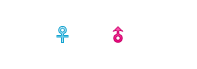
<style>
.page{position:relative;width:197px;height:69px;background:#ffffff}
.page>*{position:absolute;margin:0}
.t1{font:18px "DFPYaSongW9";letter-spacing:0.04em}
.t2{font:18px "DFPYaSongW9";letter-spacing:0.04em;color:#de147d}
</style>
<div class="page">
<p class="t1" style="left:56px;top:26px;width:13px;height:17px">♀</p>
<p class="t2" style="left:112px;top:26px;width:12px;height:17px">♂</p>
</div>
